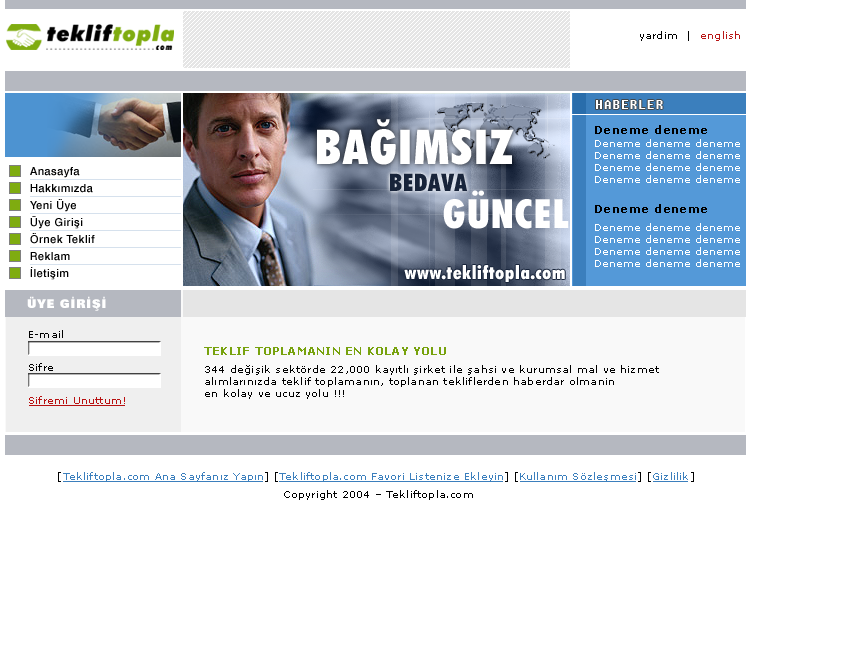
<style>
.page{position:relative;width:850px;height:650px;background:#ffffff}
.page>*{position:absolute;margin:0}
.t1{font:10px "Verdana";letter-spacing:0.02em;color:#000000}
.t2{font:10px "Verdana";letter-spacing:0.02em;color:#b91717}
.t3{font:13px "Fixedsys";letter-spacing:0.04em;color:#ffffff}
.t4{font:48px "FuturaBT-ExtraBlackCondensed";letter-spacing:0.04em;color:#ffffff}
.t5{font:11px "Verdana-Bold";letter-spacing:0.04em;color:#000000}
.t6{font:10px "Verdana";color:#ffffff}
.t7{font:11px/17px "Swiss721BT-Medium";letter-spacing:0.04em;color:#000000}
.t8{font:24px "FuturaBT-ExtraBlackCondensed";letter-spacing:0.04em;color:#18243a}
.t9{font:40px "FuturaBT-ExtraBlackCondensed";letter-spacing:0.04em;color:#ffffff}
.t10{font:18px "FuturaBT-ExtraBlackCondensed";letter-spacing:0.04em;color:#ffffff}
.t11{font:12px "ZurichBT-ExtraBlack";letter-spacing:0.06em;color:#ffffff}
.t12{font:10px/11px "Verdana";letter-spacing:0.02em;color:#b81010}
.t13{font:10px/11px "Verdana";letter-spacing:0.02em;color:#000000}
.t14{font:11px "Verdana-Bold";letter-spacing:0.02em;color:#7fac10}
.t15{font:10px/18px "Verdana";letter-spacing:0.02em;color:#3b7fbd}
.t16{font:10px/18px "Verdana";letter-spacing:0.02em;color:#000000}
</style>
<div class="page">
<p class="t1" style="left:640px;top:31px;width:100px;height:10px">yardim  |  <span class="t2">english</span></p>
<p class="t3" style="left:596px;top:100px;width:67px;height:9px">HABERLER</p>
<p class="t4" style="left:317px;top:119px;width:197px;height:46px">BAÐIMSIZ</p>
<p class="t5" style="left:595px;top:125px;width:112px;height:88px">Deneme deneme<br><br><br><br><br><br>Deneme deneme</p>
<p class="t6" style="left:595px;top:139px;width:145px;height:128px">Deneme deneme deneme<br>Deneme deneme deneme<br>Deneme deneme deneme<br>Deneme deneme deneme<br><br><br><br>Deneme deneme deneme<br>Deneme deneme deneme<br>Deneme deneme deneme<br>Deneme deneme deneme</p>
<p class="t7" style="left:30px;top:167px;width:65px;height:113px">Anasayfa<br>Hakkýmýzda<br>Yeni Üye<br>Üye Giriþi<br>Örnek Teklif<br>Reklam<br>Ýletiþim</p>
<p class="t8" style="left:390px;top:173px;width:77px;height:18px">BEDAVA</p>
<p class="t9" style="left:443px;top:190px;width:126px;height:39px">GÜNCEL</p>
<p class="t10" style="left:404px;top:265px;width:161px;height:17px">www.tekliftopla.com</p>
<p class="t11" style="left:27px;top:296px;width:79px;height:15px">ÜYE GÝRÝÞÝ</p>
<p class="t12" style="left:29px;top:330px;width:96px;height:74px"><span class="t13">E-mail<br><br><br>Sifre<br><br><br></span>Sifremi Unuttum!</p>
<p class="t14" style="left:204px;top:347px;width:242px;height:8px">TEKLIF TOPLAMANIN EN KOLAY YOLU</p>
<p class="t1" style="left:205px;top:365px;width:454px;height:34px">344 değişik sektörde 22,000 kayıtlı şirket ile şahsi ve kurumsal mal ve hizmet <br>alımlarınızda teklif toplamanın, toplanan tekliflerden haberdar olmanin<br>en kolay ve ucuz yolu !!!</p>
<p class="t15" style="left:58px;top:472px;width:636px;height:28px;text-align:center"><span class="t16">[</span>Tekliftopla.com Ana Sayfanız Yapın<span class="t16">] [</span>Tekliftopla.com Favori Listenize Ekleyin<span class="t16">] [</span>Kullanım Sözleşmesi<span class="t16">] [</span>Gizlilik<span class="t16">] <br> Copyright 2004 – Tekliftopla.com</span></p>
</div>
